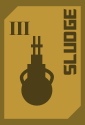
<style>
.page{position:relative;width:85px;height:125px;background:#bf9739}
.page>*{position:absolute;margin:0}
.t1{font:20px "TransformersMovie";letter-spacing:0.04em;color:#4c3f17}
.t2{font:20px "TimesNewRomanPS-BoldMT";letter-spacing:-0.04em;color:#4c3f17}
</style>
<div class="page">
<p class="t1" style="left:63px;top:8px;width:14px;height:67px;rotate:-90deg">sludge</p>
<p class="t2" style="left:9px;top:21px;width:21px;height:14px">III</p>
</div>
